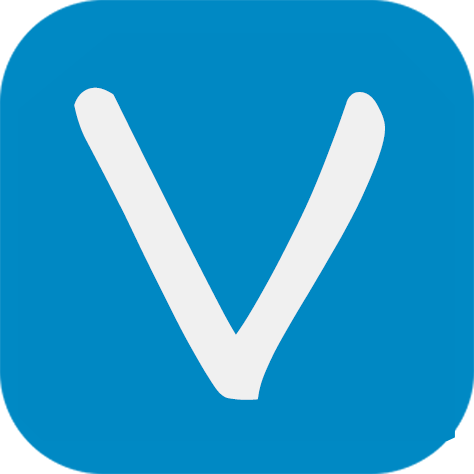
<style>
.page{position:relative;width:474px;height:474px;background:#0088c3}
.page>*{position:absolute;margin:0}
.t1{font:415.6px "SegoeScript";letter-spacing:-0.06em;color:#f0f0f0;font-weight:bold}
</style>
<div class="page">
<p class="t1" style="left:74px;top:87px;width:311px;height:313px;rotate:-4deg">V</p>
</div>
